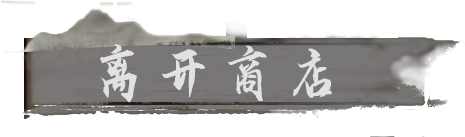
<style>
.page{position:relative;width:465px;height:137px;background:#ffffff}
.page>*{position:absolute;margin:0}
.t1{font:54.9px "YUN-FEN-FEI-YUN-TI";letter-spacing:0.1em;color:#e1e1e1}
</style>
<div class="page">
<p class="t1" style="left:100px;top:44px;width:232px;height:59px">离开商店</p>
</div>
